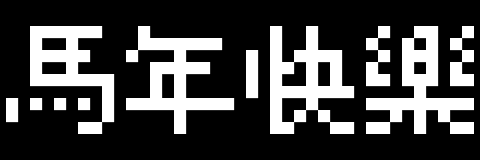
<style>
.page{position:relative;width:480px;height:160px;background:#000000}
.page>*{position:absolute;margin:0}
.t1{font:120px "DinkieBitmap-9px";color:#ffffff}
</style>
<div class="page">
<p class="t1" style="left:6px;top:26px;width:468px;height:108px">馬年快樂</p>
</div>
